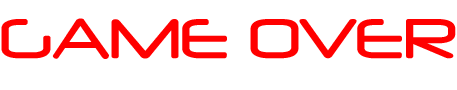
<style>
.page{position:relative;width:457px;height:90px;background:#ffffff}
.page>*{position:absolute;margin:0}
.t1{font:66px "Neuropol";color:#ff0000}
</style>
<div class="page">
<p class="t1" style="left:1px;top:18px;width:455px;height:41px">GAME OVER</p>
</div>
